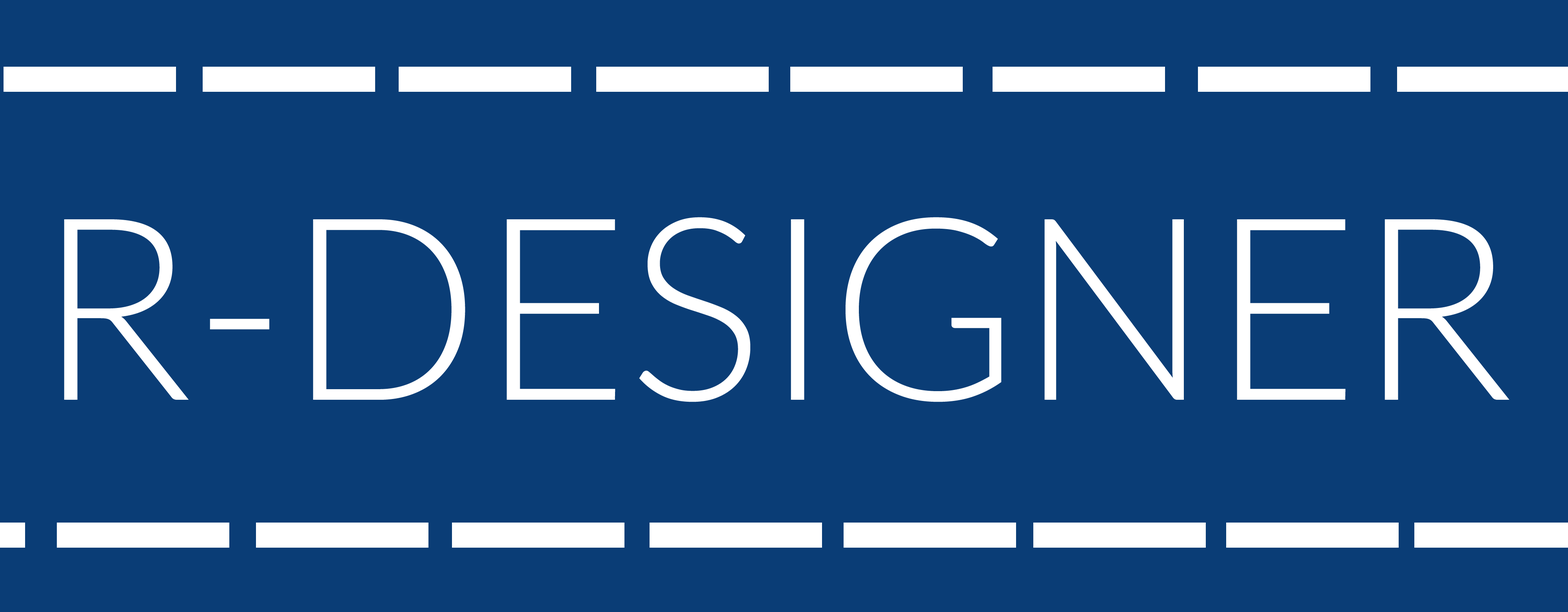
<style>
.page{position:relative;width:1568px;height:612px;background:#0a3d76}
.page>*{position:absolute;margin:0}
.t1{font:254.8px "Lato-Light";color:#ffffff}
</style>
<div class="page">
<p class="t1" style="left:64px;top:217px;width:1446px;height:185px">R-DESIGNER</p>
</div>
